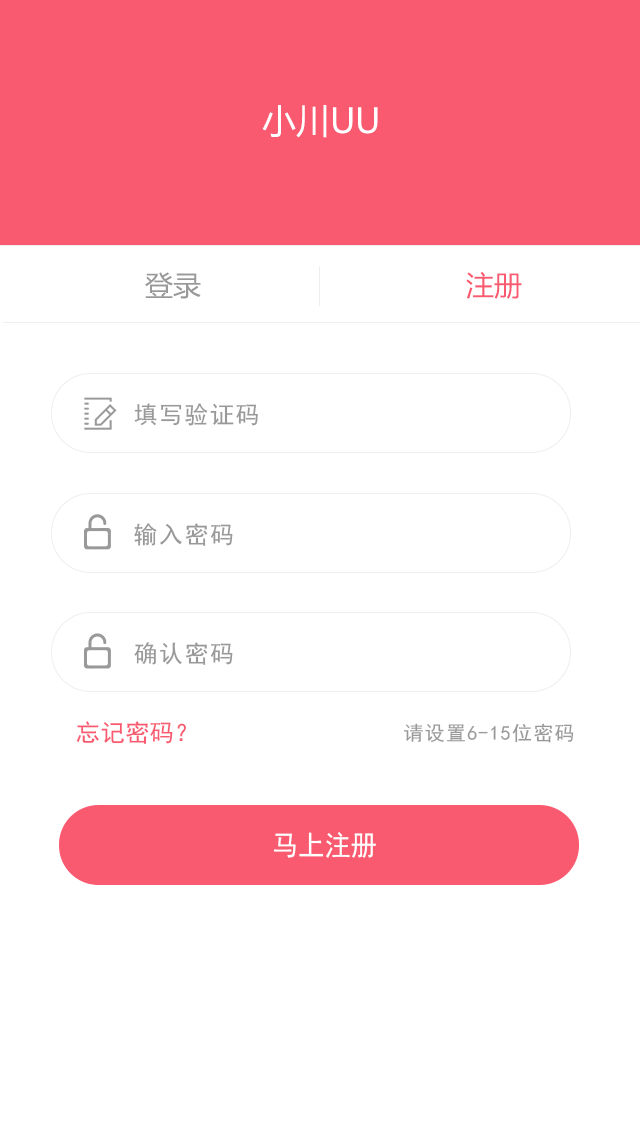
<style>
.page{position:relative;width:640px;height:1136px;background:#ffffff}
.page>*{position:absolute;margin:0}
.t1{font:34px "MicrosoftYaHei";color:#ffffff}
.t2{font:28px "MicrosoftYaHei";color:#999999}
.t3{font:28px "MicrosoftYaHei";color:#f95a70}
.t4{font:24px "SimHei";letter-spacing:0.06em;color:#999999}
.t5{font:24px "SimHei";color:#f95a70}
.t6{font:20px "SimHei";letter-spacing:0.06em;color:#999999}
.t7{font:28px "SimHei";color:#ffffff;scale:0.94 1}
</style>
<div class="page">
<p class="t1" style="left:262px;top:105px;width:116px;height:33px">小川UU</p>
<p class="t2" style="left:145px;top:272px;width:56px;height:27px">登录</p>
<p class="t3" style="left:466px;top:271px;width:56px;height:28px">注册</p>
<p class="t4" style="left:134px;top:403px;width:124px;height:23px">填写验证码</p>
<p class="t4" style="left:134px;top:523px;width:99px;height:23px">输入密码</p>
<p class="t4" style="left:134px;top:642px;width:99px;height:23px">确认密码</p>
<p class="t5" style="left:76px;top:721px;width:110px;height:23px">忘记密码？</p>
<p class="t6" style="left:404px;top:723px;width:170px;height:20px">请设置6-15位密码</p>
<p class="t7" style="left:273px;top:832px;width:103px;height:26px">马上注册</p>
</div>
